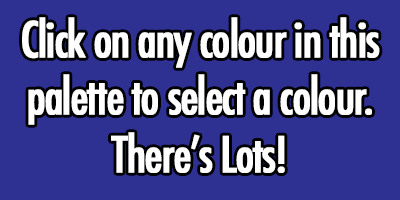
<style>
.page{position:relative;width:400px;height:200px;background:#2e3192}
.page>*{position:absolute;margin:0}
.t1{font:48px "Futura-CondensedMedium";letter-spacing:-0.05em;color:#ffffff;font-weight:bold}
</style>
<div class="page">
<p class="t1" style="left:22px;top:17px;width:358px;height:156px;text-align:center">Click on any colour in this palette to select a colour. There’s Lots!</p>
</div>
